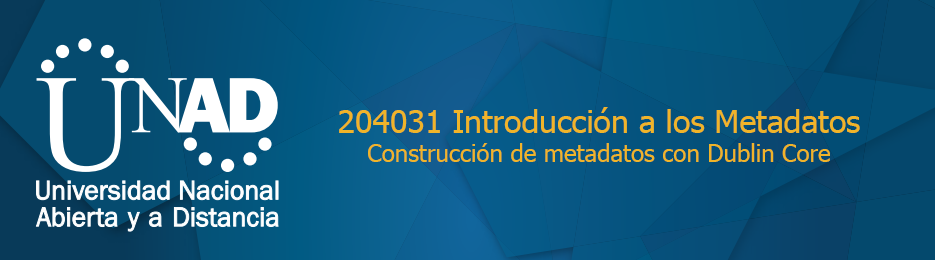
<style>
.page{position:relative;width:935px;height:260px}
.page>*{position:absolute;margin:0}
.t1{font:24px "Tahoma";color:#f0b429}
.t2{font:32px "Tahoma";color:#f0b429}
</style>
<div class="page">
<p class="t1" style="left:339px;top:107px;width:521px;height:55px;text-align:center"><span class="t2">204031 Introducción a los Metadatos<br></span>Construcción de metadatos con Dublin Core</p>
</div>
